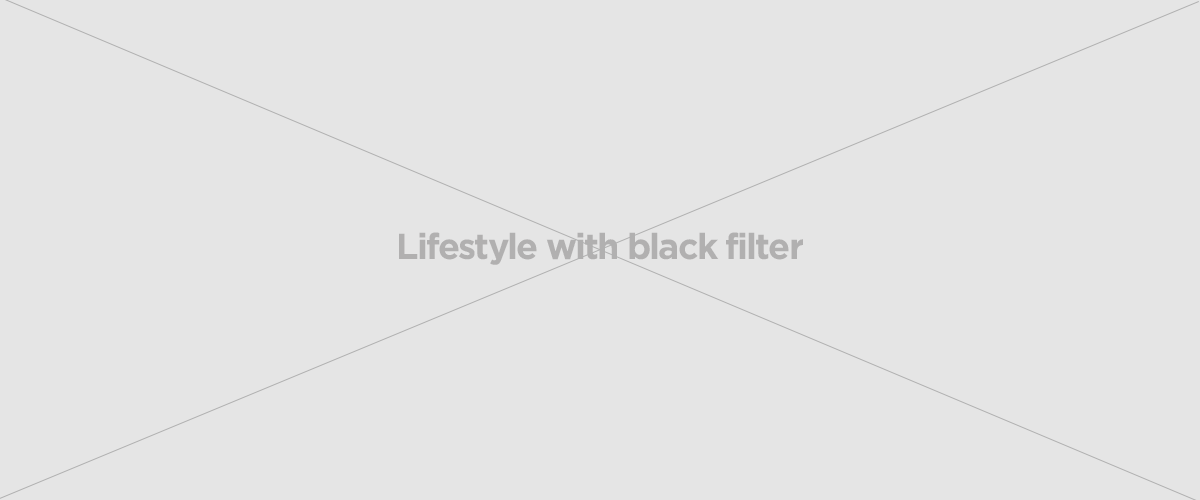
<style>
.page{position:relative;width:1200px;height:500px;background:#e5e5e5}
.page>*{position:absolute;margin:0}
.t1{font:36px "GothamBold";letter-spacing:-0.05em;color:#b1b0b0}
</style>
<div class="page">
<p class="t1" style="left:399px;top:232px;width:404px;height:33px">Lifestyle with black filter</p>
</div>
